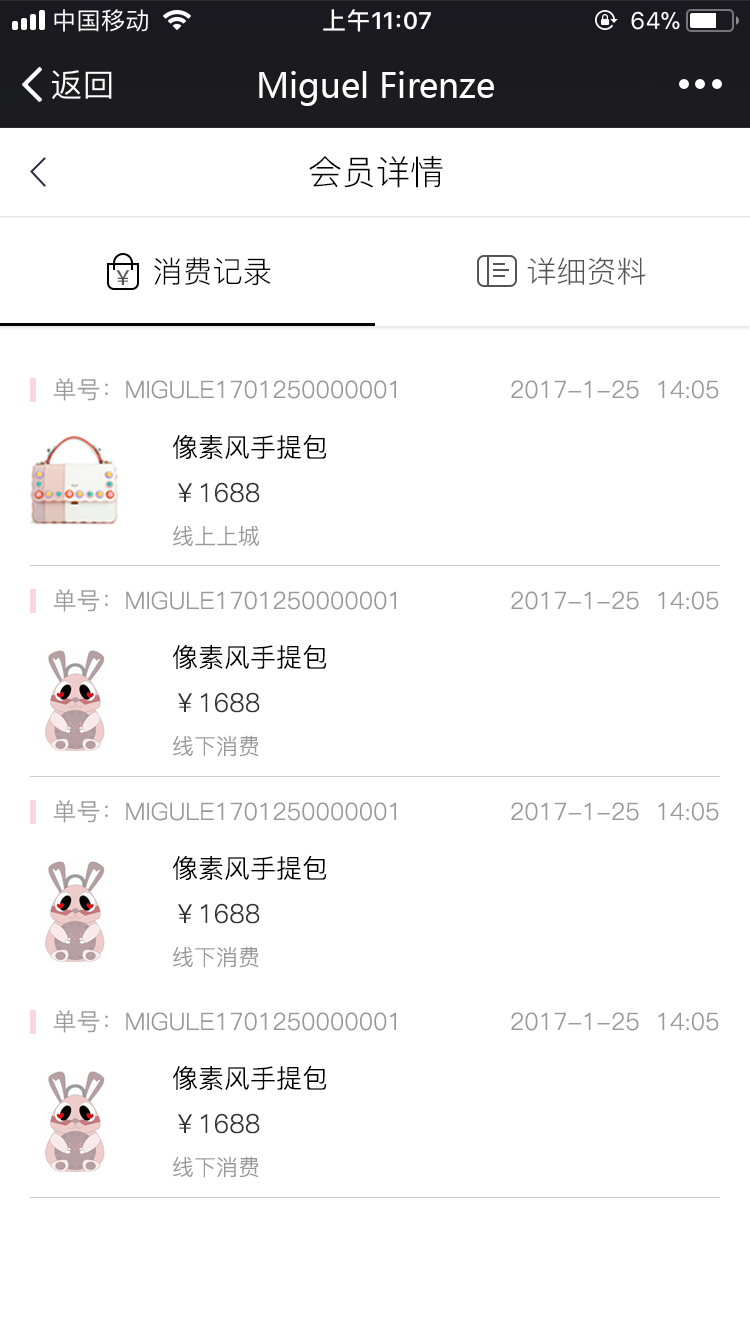
<style>
.page{position:relative;width:750px;height:1334px;background:#ffffff}
.page>*{position:absolute;margin:0}
.t1{font:34px "MicrosoftYaHei";color:#ffffff}
.t2{font:34px "PingFang-SC-Regular";color:#000000}
.t3{font:30px "PingFang-SC-Regular";color:#000000}
.t4{font:30px "PingFang-SC-Regular";color:#555555}
.t5{font:20px "SourceHanSansCN-Medium";color:#555555}
.t6{font:24px "PingFang-SC-Regular";color:#999999}
.t7{font:26px "PingFang-SC-Regular";color:#000000}
.t8{font:26px "PingFang-SC-Regular";color:#333333}
.t9{font:22px "PingFang-SC-Regular";color:#999999}
</style>
<div class="page">
<p class="t1" style="left:259px;top:71px;width:235px;height:35px">Miguel Firenze</p>
<p class="t2" style="left:309px;top:156px;width:134px;height:32px">会员详情</p>
<p class="t3" style="left:154px;top:257px;width:117px;height:28px">消费记录</p>
<p class="t4" style="left:527px;top:257px;width:119px;height:28px">详细资料</p>
<p class="t5" style="left:116px;top:270px;width:14px;height:15px">￥</p>
<p class="t6" style="left:53px;top:378px;width:343px;height:23px">单号：MIGULE1701250000001</p>
<p class="t6" style="left:511px;top:380px;width:208px;height:19px">2017-1-25  14:05</p>
<p class="t7" style="left:173px;top:434px;width:154px;height:112px">像素风手提包<br><span class="t8">￥1688<br></span><span class="t9">线上上城</span></p>
<p class="t6" style="left:53px;top:589px;width:343px;height:23px">单号：MIGULE1701250000001</p>
<p class="t6" style="left:511px;top:591px;width:208px;height:19px">2017-1-25  14:05</p>
<p class="t7" style="left:173px;top:644px;width:154px;height:113px">像素风手提包<br><span class="t8">￥1688<br></span><span class="t9">线下消费</span></p>
<p class="t6" style="left:53px;top:800px;width:343px;height:23px">单号：MIGULE1701250000001</p>
<p class="t6" style="left:511px;top:802px;width:208px;height:19px">2017-1-25  14:05</p>
<p class="t7" style="left:173px;top:855px;width:154px;height:113px">像素风手提包<br><span class="t8">￥1688<br></span><span class="t9">线下消费</span></p>
<p class="t6" style="left:53px;top:1010px;width:343px;height:23px">单号：MIGULE1701250000001</p>
<p class="t6" style="left:511px;top:1012px;width:208px;height:19px">2017-1-25  14:05</p>
<p class="t7" style="left:173px;top:1065px;width:154px;height:113px">像素风手提包<br><span class="t8">￥1688<br></span><span class="t9">线下消费</span></p>
</div>
